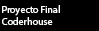
<style>
.page{position:relative;width:99px;height:31px;background:#000000}
.page>*{position:absolute;margin:0}
.t1{font:10px "MyriadPro-Regular";color:#ffffff}
</style>
<div class="page">
<p class="t1" style="left:2px;top:5px;width:58px;height:20px">Proyecto Final<br>Coderhouse</p>
</div>
